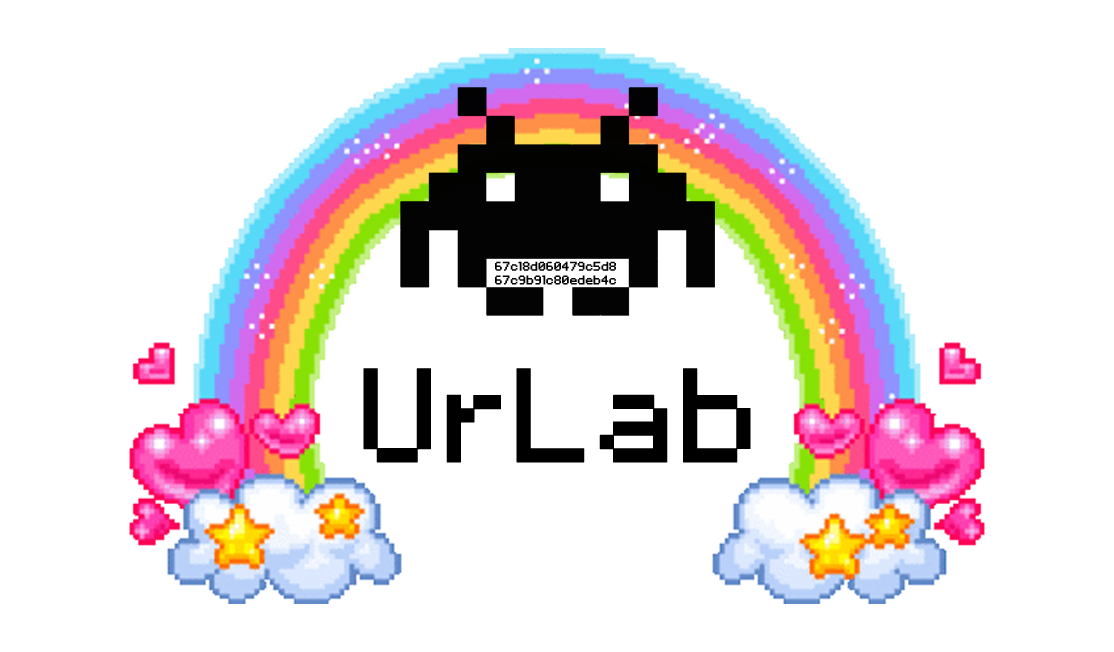
<style>
.page{position:relative;width:1114px;height:652px;background:#ffffff}
.page>*{position:absolute;margin:0}
.t1{font:11.4px "VolterGoldfish";color:#000000;font-weight:bold}
.t2{font:120px "VolterGoldfish";color:#000000;font-weight:bold}
</style>
<div class="page">
<p class="t1" style="left:495px;top:261px;width:121px;height:24px">67c18d060479c5d8<br>67c9b91c80edeb4c</p>
<p class="t2" style="left:363px;top:368px;width:388px;height:95px">UrLab</p>
</div>
